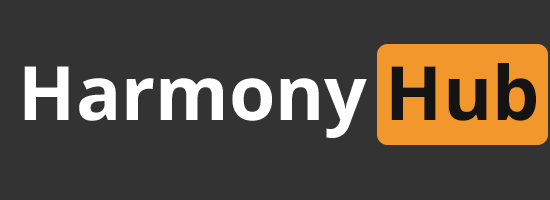
<style>
.page{position:relative;width:550px;height:200px;background:#333333}
.page>*{position:absolute;margin:0}
.t1{font:75px "Sahel-Bold";color:#ffffff}
.t2{font:75px "Sahel-Bold";color:#131313}
</style>
<div class="page">
<p class="t1" style="left:24px;top:63px;width:512px;height:75px">Harmony<span class="t2"> Hub</span></p>
</div>
